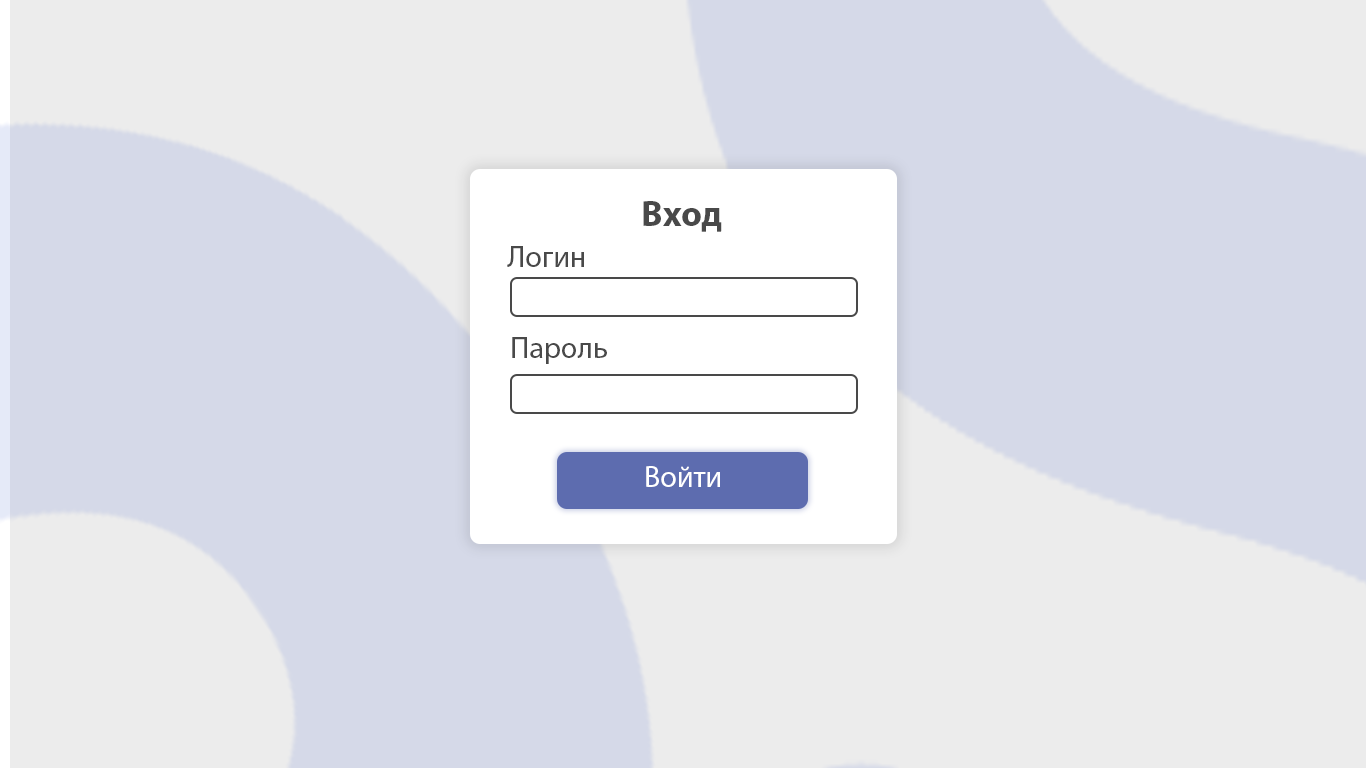
<style>
.page{position:relative;width:1366px;height:768px;background:#d5d9e8}
.page>*{position:absolute;margin:0}
.t1{font:36px "MyriadPro-Bold";color:#494949}
.t2{font:30px "MyriadPro-Regular";color:#494949}
.t3{font:30px "MyriadPro-Regular";color:#ffffff}
</style>
<div class="page">
<p class="t1" style="left:643px;top:201px;width:79px;height:31px">Вход</p>
<p class="t2" style="left:507px;top:246px;width:77px;height:21px">Логин</p>
<p class="t2" style="left:512px;top:337px;width:95px;height:27px">Пароль</p>
<p class="t3" style="left:646px;top:466px;width:74px;height:21px">Войти</p>
</div>
